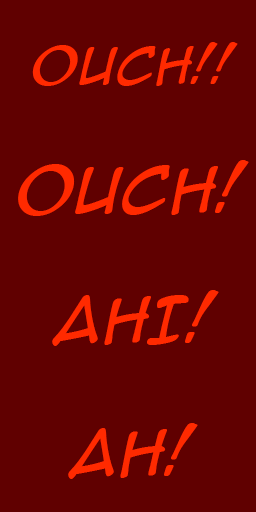
<style>
.page{position:relative;width:256px;height:512px;background:#600000}
.page>*{position:absolute;margin:0}
.t1{font:48px "AnimeAce2.0BB-Italic";letter-spacing:0.03em;color:#ff2a00}
.t2{font:60px "AnimeAce2.0BB-Italic";letter-spacing:0.03em;color:#ff2a00}
</style>
<div class="page">
<p class="t1" style="left:32px;top:42px;width:206px;height:44px">OUCH!!</p>
<p class="t2" style="left:18px;top:160px;width:231px;height:56px">OUCH!</p>
<p class="t2" style="left:52px;top:290px;width:167px;height:56px">AHI!</p>
<p class="t2" style="left:68px;top:423px;width:130px;height:56px">Ah!</p>
</div>
